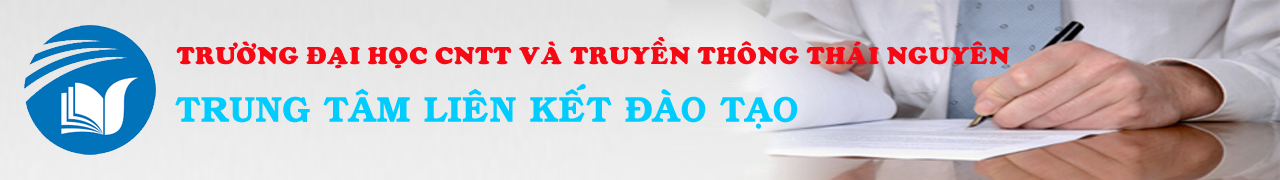
<style>
.page{position:relative;width:1280px;height:180px}
.page>*{position:absolute;margin:0}
.t1{font:24px "VNI-Cooper-Heavy";color:#f60914}
.t2{font:36px "VNI-Book-Bold";color:#00ccff}
</style>
<div class="page">
<p class="t1" style="left:176px;top:37px;width:834px;height:32px">TRÖÔØNG ÑAÏI HOÏC CNTT VAØ TRUYEÀN THOÂNG THAÙI NGUYEÂN</p>
<p class="t2" style="left:175px;top:84px;width:623px;height:45px">TRUNG TAÂM LIEÂN KEÁT ÑAØO TAÏO</p>
</div>
